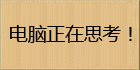
<style>
.page{position:relative;width:140px;height:70px}
.page>*{position:absolute;margin:0}
.t1{font:18.7px "MicrosoftYaHei";color:#040404}
</style>
<div class="page">
<p class="t1" style="left:10px;top:25px;width:122px;height:18px">电脑正在思考！</p>
</div>
